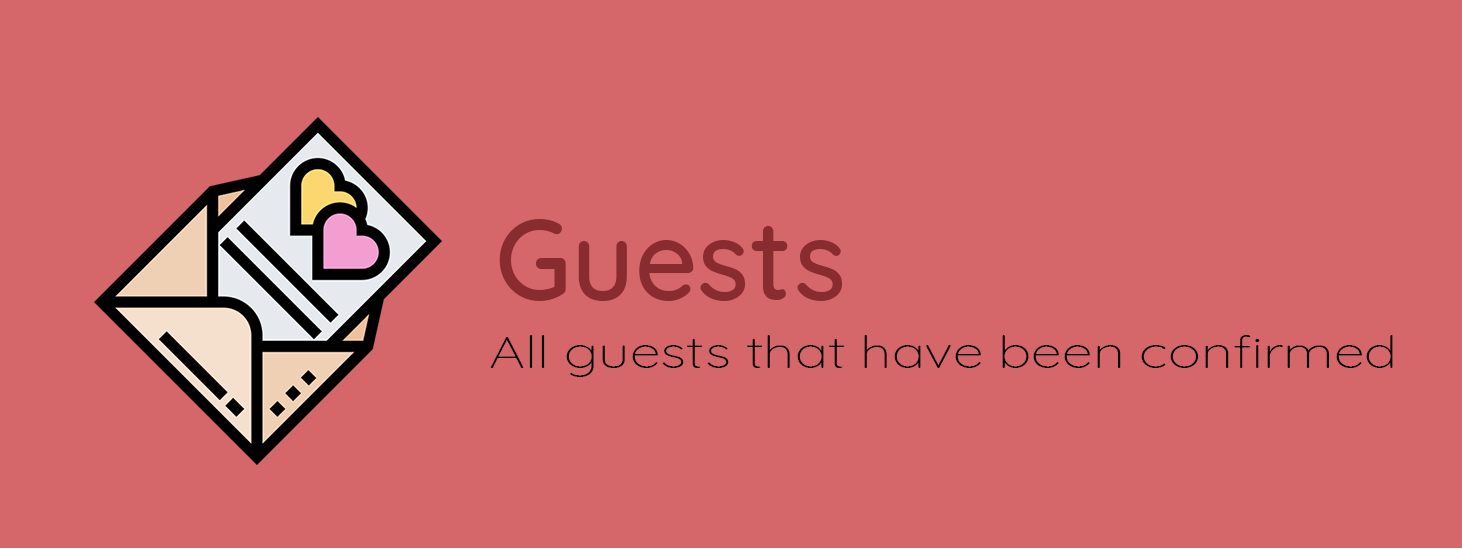
<style>
.page{position:relative;width:1462px;height:549px;background:#d5676a}
.page>*{position:absolute;margin:0}
.t1{font:113.5px "Quicksand-Medium";color:#882c2f;scale:0.97 1}
.t2{font:44.9px "Quicksand-Light";color:#000000;scale:1.24 1}
</style>
<div class="page">
<p class="t1" style="left:499px;top:219px;width:344px;height:82px">Guests</p>
<p class="t2" style="left:490px;top:335px;width:903px;height:42px">All guests that have been confirmed</p>
</div>
